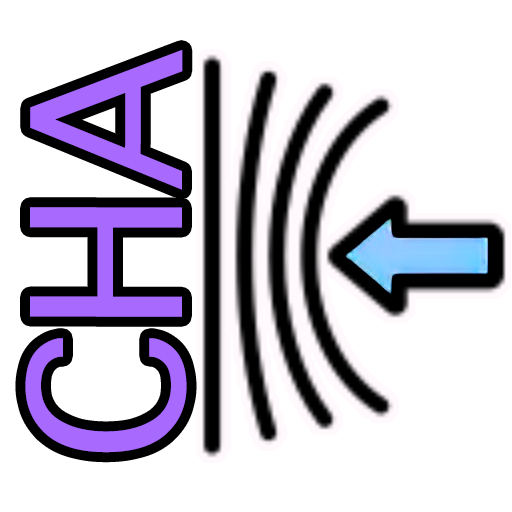
<style>
.page{position:relative;width:512px;height:512px;background:#ffffff}
.page>*{position:absolute;margin:0}
.t1{font:200px "Geneva";color:#a869fe}
</style>
<div class="page">
<p class="t1" style="left:25px;top:50px;width:162px;height:403px;rotate:-180deg">CHA</p>
</div>
